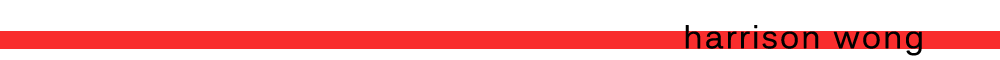
<style>
.page{position:relative;width:1000px;height:60px;background:#ffffff}
.page>*{position:absolute;margin:0}
.t1{font:31px "Kalinga";letter-spacing:0.05em;color:#000000;font-weight:bold}
</style>
<div class="page">
<p class="t1" style="left:685px;top:25px;width:237px;height:31px">harrison wong</p>
</div>
